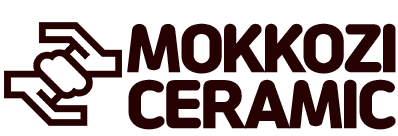
<style>
.page{position:relative;width:398px;height:136px;background:#ffffff}
.page>*{position:absolute;margin:0}
.t1{font:60px/56px "Jalnan";letter-spacing:-0.05em;color:#260101}
</style>
<div class="page">
<p class="t1" style="left:127px;top:23px;width:269px;height:107px;text-align:center">MOKKOZI<br>CERAMIC</p>
</div>
